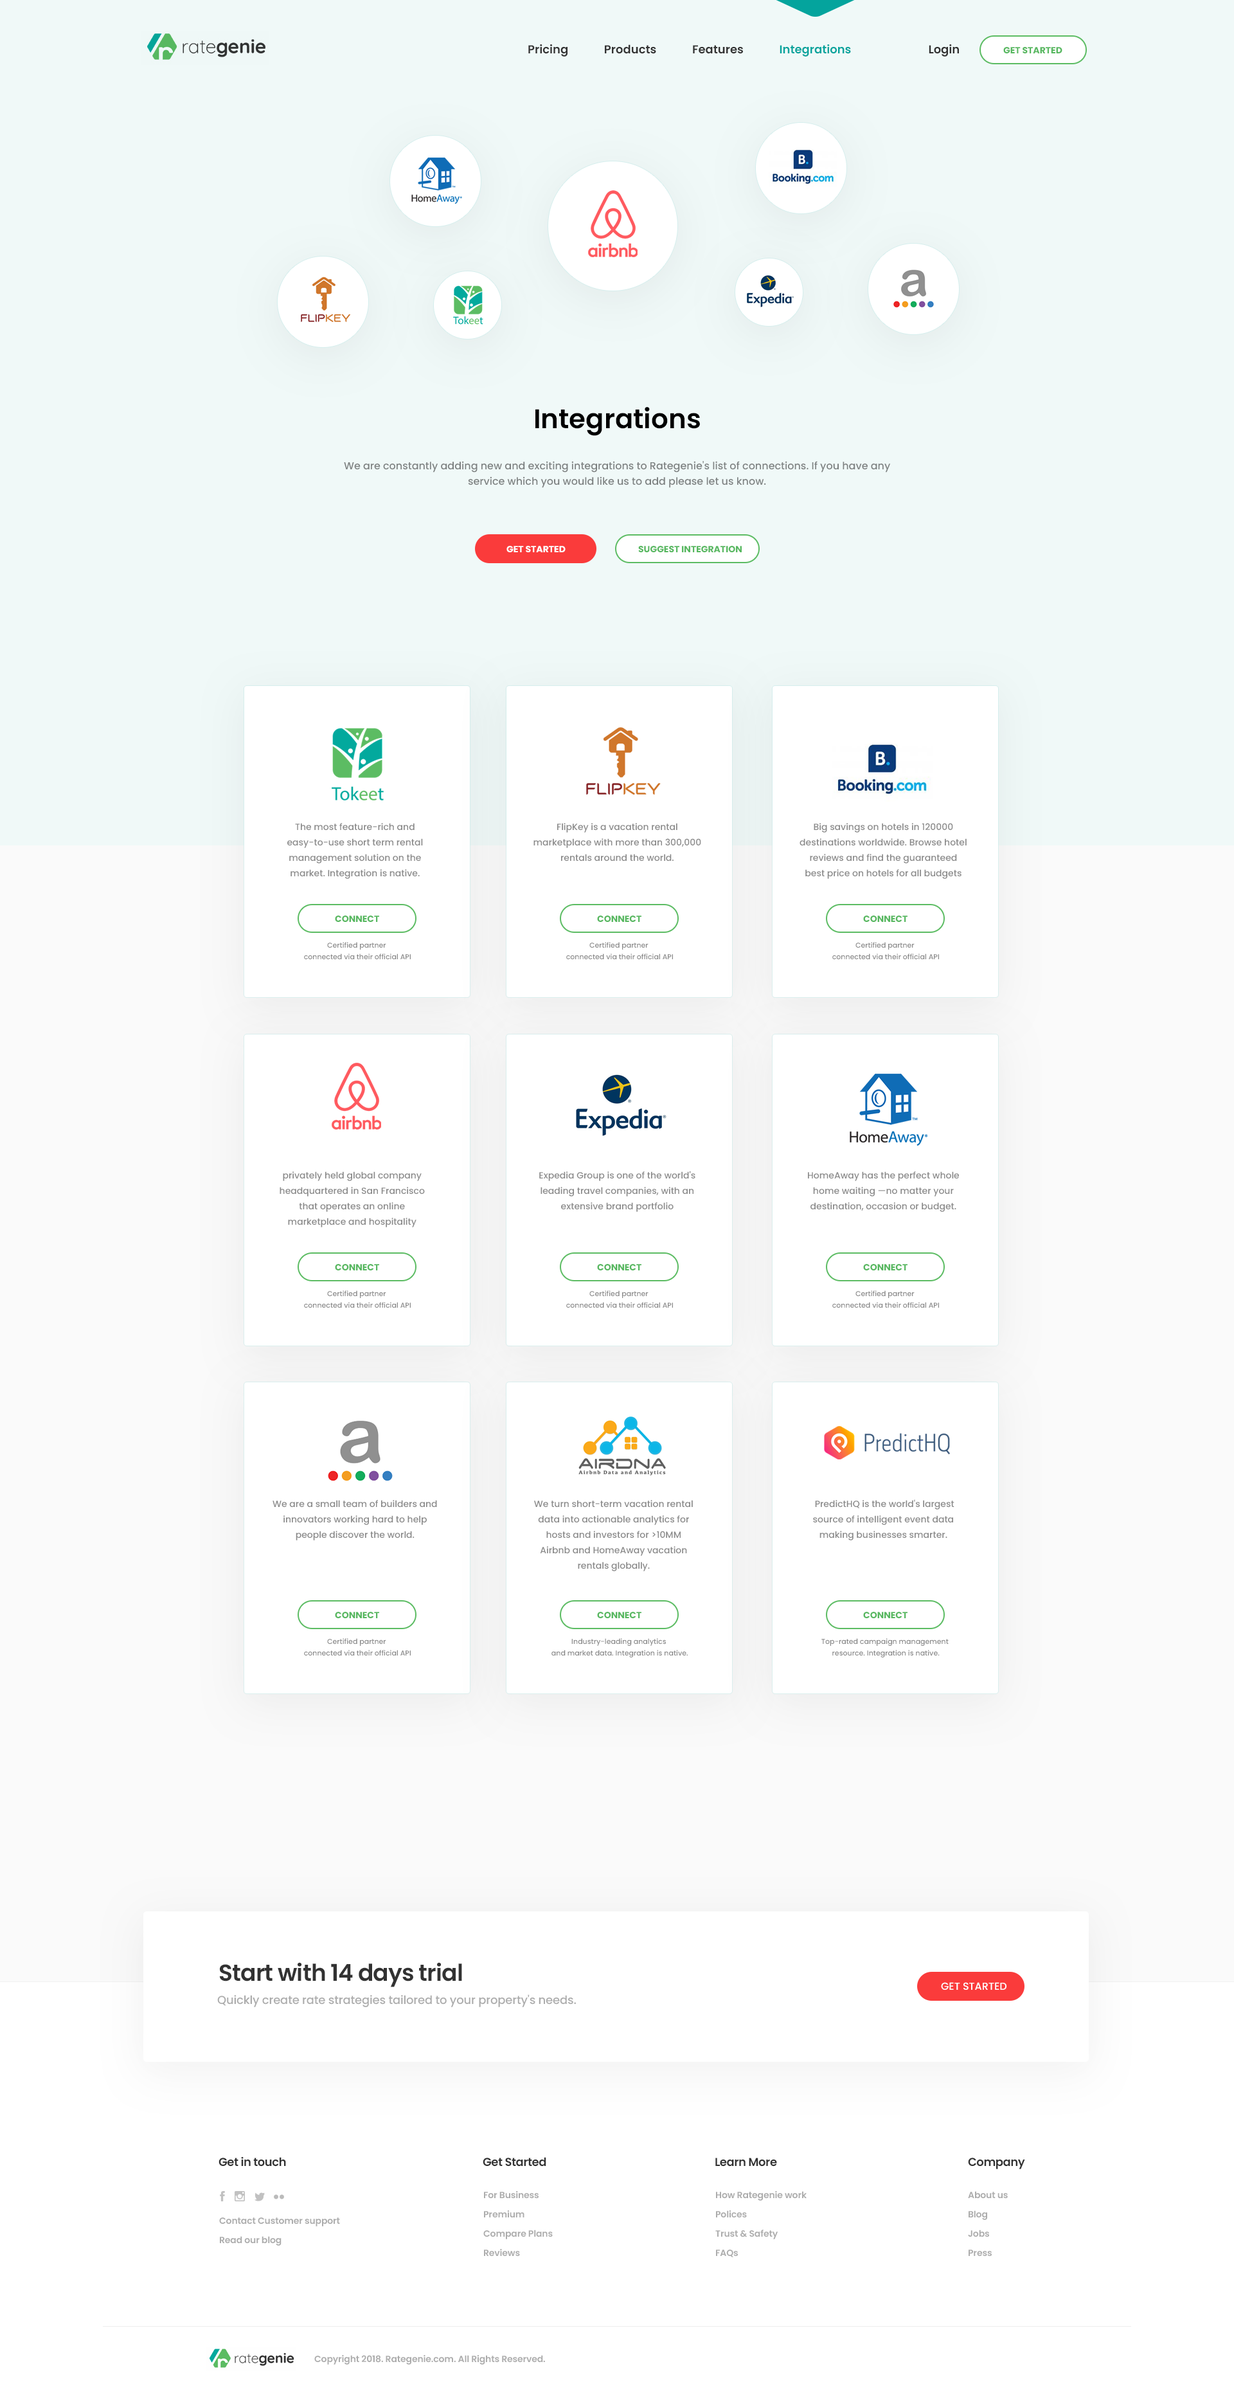
<style>
.page{position:relative;width:1234px;height:2391px;background:#ffffff}
.page>*{position:absolute;margin:0}
.t1{font:11.6px "Poppins-SemiBold";color:#323232}
.t2{font:11.6px "Poppins-SemiBold";color:#04a49d}
.t3{font:9px "Poppins-Bold";color:#57b860;text-transform:uppercase}
.t4{font:27px "Poppins-SemiBold";color:#000000}
.t5{font:10.3px/15.4px "Poppins-Medium";color:#7d8181}
.t6{font:9px "Poppins-Bold";color:#fefefe;text-transform:uppercase}
.t7{font:9px/15.4px "Poppins-Medium";color:#898989}
.t8{font:7.1px/11.6px "Poppins-Medium";color:#898989}
.t9{font:23.1px "Poppins-SemiBold";letter-spacing:-0.025em;color:#323232}
.t10{font:10.3px "Poppins-Medium";color:#fefefe;text-transform:uppercase}
.t11{font:11.6px "Poppins-Medium";letter-spacing:-0.01em;color:#acacac}
.t12{font:11.6px "Poppins-SemiBold";letter-spacing:-0.025em;color:#323232}
.t13{font:9px/19.3px "Poppins-SemiBold";letter-spacing:-0.01em;color:#acacac}
.t14{font:9px "Poppins-SemiBold";letter-spacing:-0.01em;color:#acacac}
</style>
<div class="page">
<p class="t1" style="left:528px;top:44px;width:431px;height:13px">Pricing             Products             Features   <span class="t2">          Integrations                           </span> Login</p>
<p class="t3" style="left:1004px;top:47px;width:59px;height:6px">get started</p>
<p class="t4" style="left:536px;top:407px;width:164px;height:29px">Integrations</p>
<p class="t5" style="left:344px;top:461px;width:547px;height:27px;text-align:center">We are constantly adding new and exciting integrations to Rategenie's list of connections. If you have any service which you would like us to add please let us know.</p>
<p class="t6" style="left:507px;top:546px;width:59px;height:6px">GEt Started</p>
<p class="t3" style="left:638px;top:546px;width:104px;height:6px">Suggest integration</p>
<p class="t7" style="left:287px;top:823px;width:136px;height:56px;text-align:center">The most feature-rich and easy-to-use short term rental <br>management solution on the market. Integration is native.</p>
<p class="t7" style="left:534px;top:823px;width:167px;height:38px;text-align:center">FlipKey is a vacation rental <br>marketplace with more than 300,000 rentals around the world.</p>
<p class="t7" style="left:800px;top:823px;width:167px;height:56px;text-align:center">Big savings on hotels in 120000 <br>destinations worldwide. Browse hotel reviews and find the guaranteed best price on hotels for all budgets</p>
<p class="t3" style="left:335px;top:915px;width:44px;height:7px">connect</p>
<p class="t3" style="left:597px;top:915px;width:45px;height:7px">connect</p>
<p class="t3" style="left:863px;top:915px;width:45px;height:7px">connect</p>
<p class="t8" style="left:304px;top:942px;width:107px;height:17px;text-align:center">Certified partner <br>connected via their official API</p>
<p class="t8" style="left:566px;top:942px;width:107px;height:17px;text-align:center">Certified partner <br>connected via their official API</p>
<p class="t8" style="left:833px;top:942px;width:106px;height:17px;text-align:center">Certified partner <br>connected via their official API</p>
<p class="t7" style="left:280px;top:1171px;width:145px;height:56px;text-align:center">privately held global company headquartered in San Francisco that operates an online <br>marketplace and hospitality</p>
<p class="t7" style="left:539px;top:1171px;width:157px;height:41px;text-align:center">Expedia Group is one of the world's leading travel companies, with an extensive brand portfolio</p>
<p class="t7" style="left:808px;top:1171px;width:151px;height:41px;text-align:center">HomeAway has the perfect whole home waiting —no matter your <br>destination, occasion or budget.</p>
<p class="t3" style="left:335px;top:1264px;width:44px;height:6px">connect</p>
<p class="t3" style="left:597px;top:1264px;width:45px;height:6px">connect</p>
<p class="t3" style="left:863px;top:1264px;width:45px;height:6px">connect</p>
<p class="t8" style="left:304px;top:1290px;width:107px;height:18px;text-align:center">Certified partner <br>connected via their official API</p>
<p class="t8" style="left:566px;top:1290px;width:107px;height:18px;text-align:center">Certified partner <br>connected via their official API</p>
<p class="t8" style="left:833px;top:1290px;width:106px;height:18px;text-align:center">Certified partner <br>connected via their official API</p>
<p class="t7" style="left:273px;top:1500px;width:164px;height:40px;text-align:center">We are a small team of builders and innovators working hard to help people discover the world.</p>
<p class="t7" style="left:534px;top:1500px;width:159px;height:71px;text-align:center">We turn short-term vacation rental data into actionable analytics for hosts and investors for &gt;10MM Airbnb and HomeAway vacation rentals globally.</p>
<p class="t7" style="left:813px;top:1499px;width:142px;height:41px;text-align:center">PredictHQ is the world's largest source of intelligent event data making businesses smarter.</p>
<p class="t3" style="left:335px;top:1612px;width:44px;height:6px">connect</p>
<p class="t3" style="left:597px;top:1612px;width:45px;height:6px">connect</p>
<p class="t3" style="left:863px;top:1612px;width:45px;height:6px">connect</p>
<p class="t8" style="left:304px;top:1638px;width:107px;height:17px;text-align:center">Certified partner <br>connected via their official API</p>
<p class="t8" style="left:552px;top:1638px;width:136px;height:19px;text-align:center">Industry-leading analytics <br>and market data. Integration is native.</p>
<p class="t8" style="left:822px;top:1638px;width:127px;height:19px;text-align:center">Top-rated campaign management <br>resource. Integration is native.</p>
<p class="t9" style="left:219px;top:1962px;width:243px;height:25px">Start with 14 days trial</p>
<p class="t10" style="left:941px;top:1982px;width:66px;height:8px">Get Started</p>
<p class="t11" style="left:217px;top:1994px;width:359px;height:13px">Quickly create rate strategies tailored to your property's needs.</p>
<p class="t12" style="left:219px;top:2157px;width:67px;height:9px">Get in touch</p>
<p class="t12" style="left:483px;top:2157px;width:63px;height:9px">Get Started</p>
<p class="t12" style="left:716px;top:2157px;width:61px;height:9px">Learn More</p>
<p class="t12" style="left:968px;top:2157px;width:57px;height:12px">Company</p>
<p class="t13" style="left:483px;top:2191px;width:70px;height:65px">For Business<br>Premium<br>Compare Plans<br>Reviews</p>
<p class="t13" style="left:716px;top:2191px;width:91px;height:66px">How Rategenie work<br>Polices<br>Trust &amp; Safety<br>FAQs</p>
<p class="t13" style="left:968px;top:2191px;width:40px;height:65px">About us<br>Blog<br>Jobs<br>Press</p>
<p class="t13" style="left:219px;top:2217px;width:121px;height:29px">Contact Customer support<br>Read our blog</p>
<p class="t14" style="left:314px;top:2355px;width:231px;height:9px">Copyright 2018. Rategenie.com. All Rights Reserved.</p>
</div>
